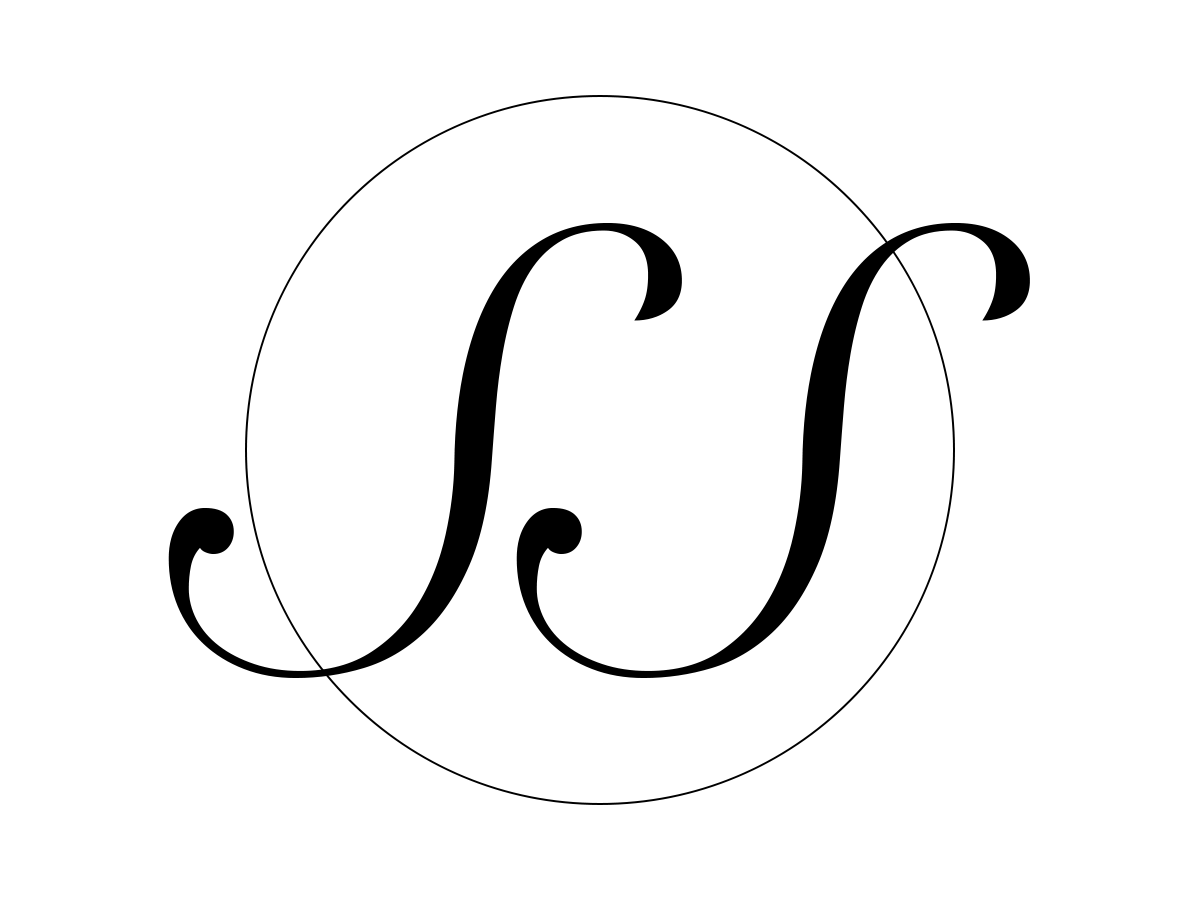
<style>
.page{position:relative;width:1200px;height:900px;background:#ffffff}
.page>*{position:absolute;margin:0}
.t1{font:625px "SnellRoundhand";color:#000000}
</style>
<div class="page">
<p class="t1" style="left:168px;top:223px;width:862px;height:455px">SS</p>
</div>
